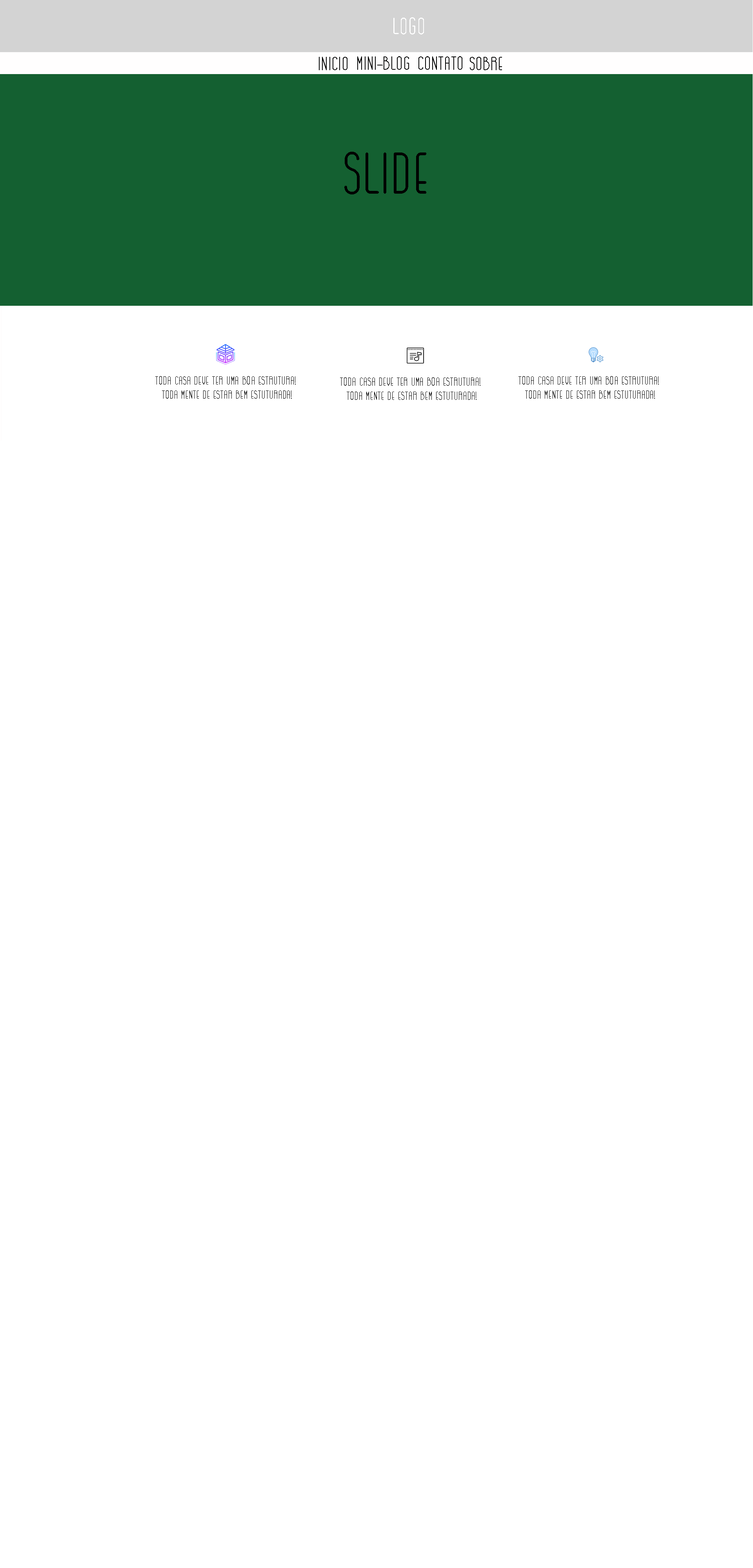
<style>
.page{position:relative;width:753px;height:1568px;background:#ffffff}
.page>*{position:absolute;margin:0}
.t1{font:23.5px "GOGOIA-Regular";color:#ffffff}
.t2{font:18.7px "GOGOIA-Regular";color:#000000}
.t3{font:18.8px "GOGOIA-Regular";color:#000000}
.t4{font:58.8px "GOGOIA-Regular";color:#000000}
.t5{font:11.8px "GOGOIA-Regular";color:#000000}
</style>
<div class="page">
<p class="t1" style="left:393px;top:17px;width:31px;height:17px">LOGO</p>
<p class="t2" style="left:319px;top:57px;width:28px;height:13px">Inicio</p>
<p class="t3" style="left:357px;top:56px;width:52px;height:14px">mini-blog</p>
<p class="t3" style="left:418px;top:56px;width:44px;height:14px">contato</p>
<p class="t2" style="left:470px;top:57px;width:32px;height:13px">sobre</p>
<p class="t4" style="left:344px;top:152px;width:82px;height:42px">Slide</p>
<p class="t5" style="left:155px;top:376px;width:141px;height:23px;text-align:center">toda casa deve ter uma boa estrutura! <br>toda mente de estar bem estuturada!</p>
<p class="t5" style="left:340px;top:377px;width:140px;height:23px;text-align:center">toda casa deve ter uma boa estrutura! <br>toda mente de estar bem estuturada!</p>
<p class="t5" style="left:518px;top:376px;width:141px;height:23px;text-align:center">toda casa deve ter uma boa estrutura! <br>toda mente de estar bem estuturada!</p>
</div>
